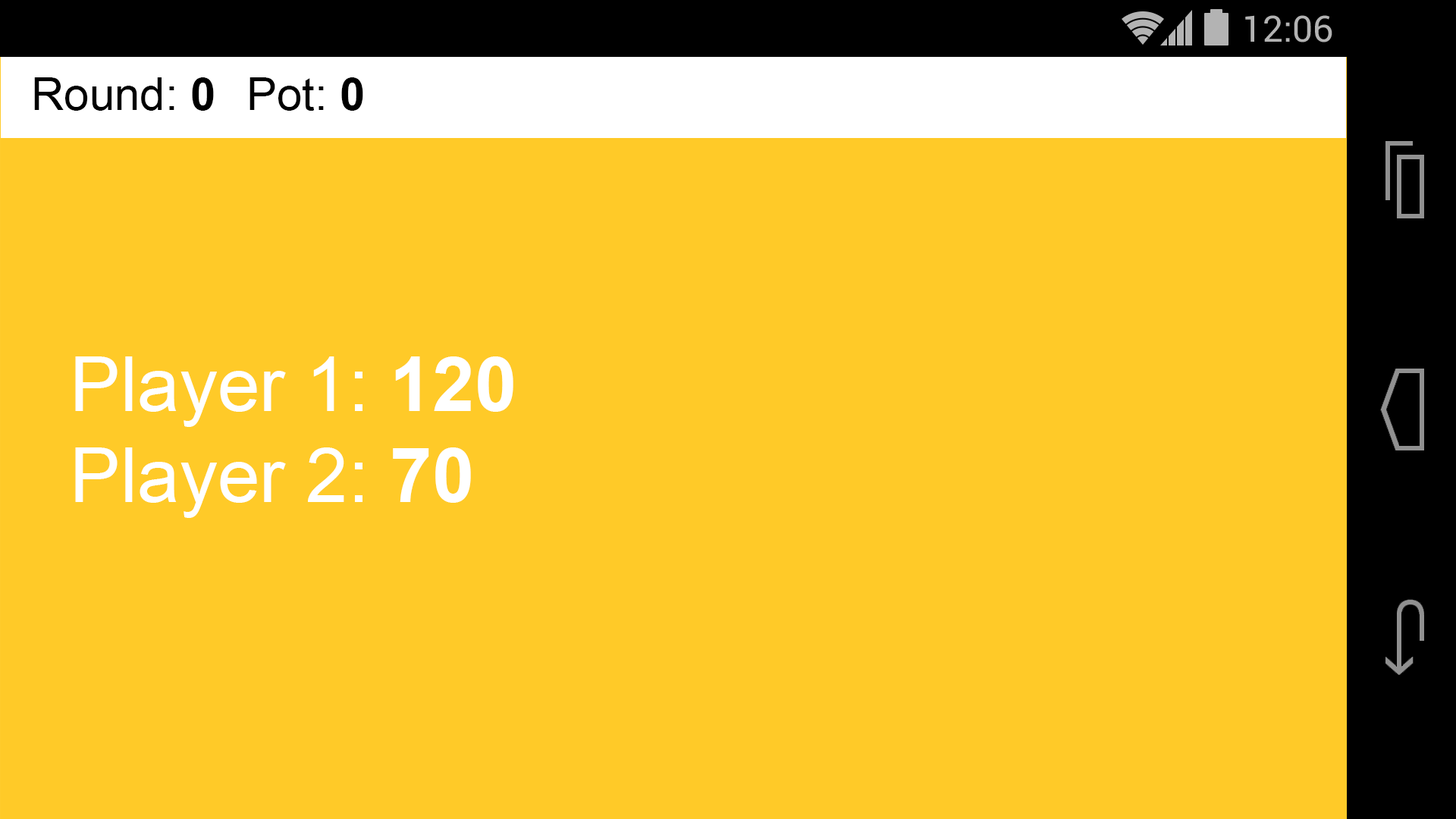
<style>
.page{position:relative;width:1456px;height:819px;background:#ffca28}
.page>*{position:absolute;margin:0}
.t1{font:45.5px "ArialMT";color:#000000}
.t2{font:45.5px "Arial-BoldMT";color:#000000}
.t3{font:75.8px "ArialMT";color:#ffffff}
.t4{font:75.8px "Arial-BoldMT";color:#ffffff}
</style>
<div class="page">
<p class="t1" style="left:34px;top:77px;width:180px;height:34px">Round: <span class="t2">0</span></p>
<p class="t1" style="left:249px;top:77px;width:114px;height:34px">Pot: <span class="t2">0</span></p>
<p class="t3" style="left:75px;top:356px;width:438px;height:162px">Player 1: <span class="t4">120</span><br>Player 2: <span class="t4">70</span></p>
</div>
